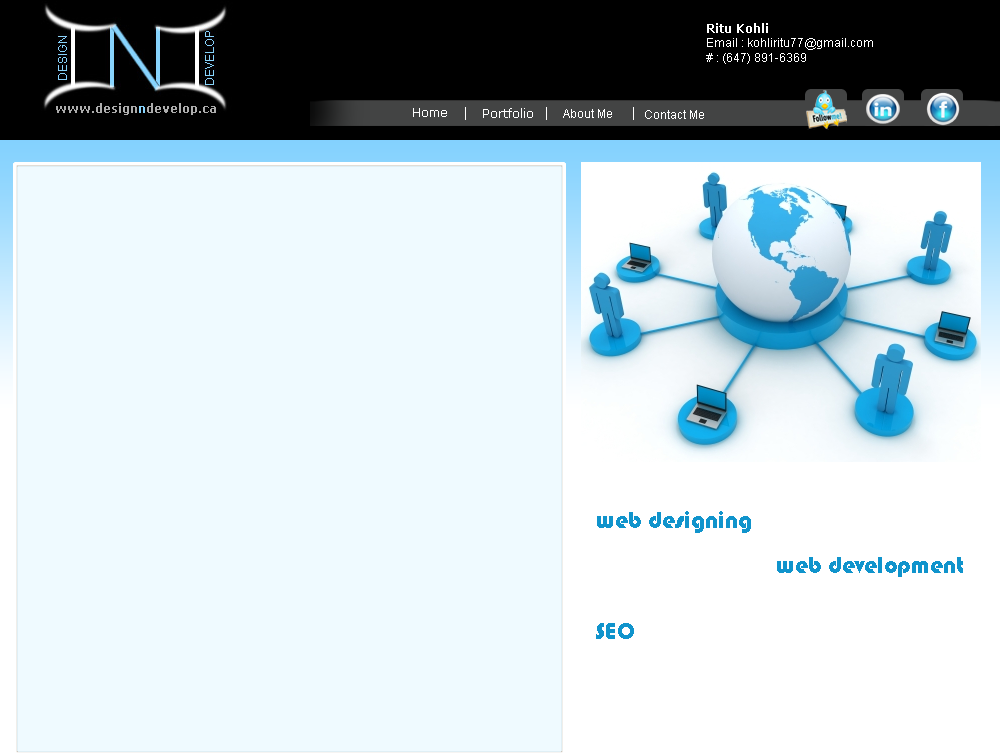
<style>
.page{position:relative;width:1000px;height:756px;background:#effaff}
.page>*{position:absolute;margin:0}
.t1{font:12px "ArialMT";color:#ffffff}
.t2{font:12px "Verdana-Bold";color:#ffffff}
.t3{font:12px "Verdana-Bold";color:#adadad}
.t4{font:12px "Verdana-Bold";color:#88d3fb}
.t5{font:12px "Verdana";color:#ffffff}
.t6{font:14px "ArialMT";color:#ffffff}
.t7{font:24px "Bauhaus93";color:#1094cc}
</style>
<div class="page">
<p class="t1" style="left:706px;top:23px;width:167px;height:41px"><span class="t2">Ritu Kohli<br></span>Email : kohliritu77@gmail.com<br># : (647) 891-6369</p>
<p class="t3" style="left:56px;top:103px;width:160px;height:12px">www.design<span class="t4">n</span>develop.ca</p>
<p class="t5" style="left:413px;top:107px;width:53px;height:13px">Home    <span class="t6">|</span></p>
<p class="t5" style="left:483px;top:108px;width:50px;height:10px">Portfolio</p>
<p class="t1" style="left:563px;top:109px;width:49px;height:9px">About Me</p>
<p class="t1" style="left:645px;top:110px;width:59px;height:9px">Contact Me</p>
<p class="t7" style="left:597px;top:511px;width:154px;height:22px">web designing</p>
<p class="t7" style="left:777px;top:557px;width:186px;height:20px">web development</p>
<p class="t7" style="left:596px;top:623px;width:38px;height:16px">SEO</p>
</div>
